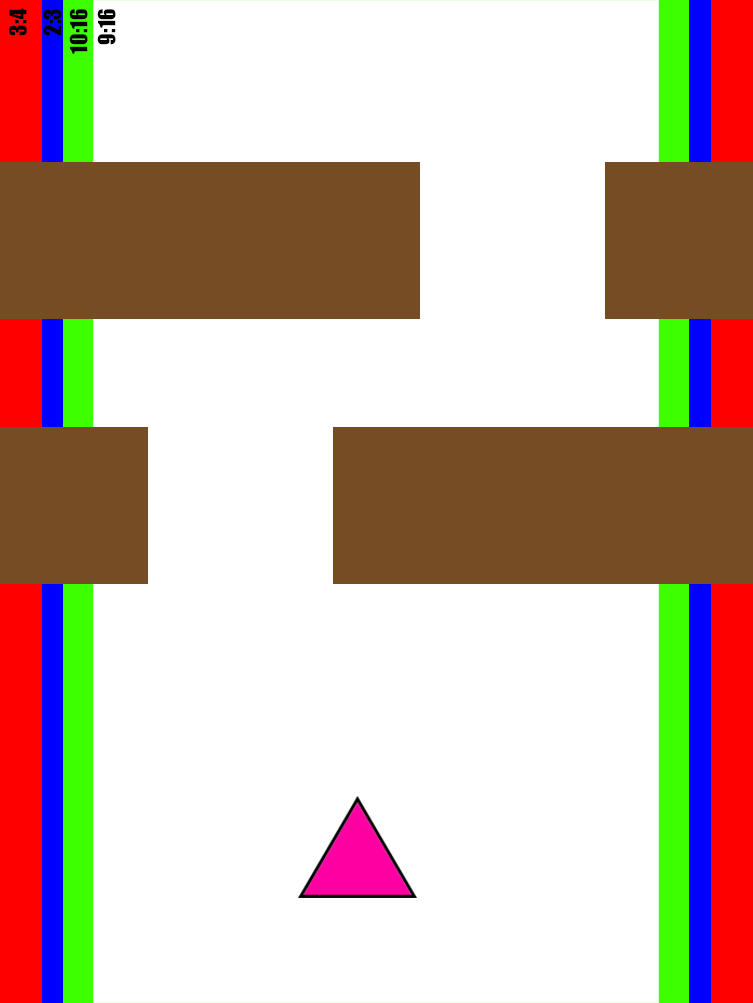
<style>
.page{position:relative;width:753px;height:1003px;background:#ffffff}
.page>*{position:absolute;margin:0}
.t1{font:21.7px "Impact";letter-spacing:0.02em;color:#000000}
</style>
<div class="page">
<p class="t1" style="left:9px;top:8px;width:18px;height:28px;rotate:-90deg">3:4</p>
<p class="t1" style="left:43px;top:9px;width:19px;height:27px;rotate:-90deg">2:3</p>
<p class="t1" style="left:69px;top:9px;width:19px;height:45px;rotate:-90deg">10:16</p>
<p class="t1" style="left:97px;top:9px;width:19px;height:36px;rotate:-90deg">9:16</p>
</div>
